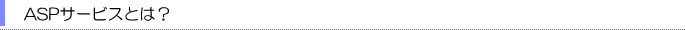
<style>
.page{position:relative;width:685px;height:30px;background:#ffffff}
.page>*{position:absolute;margin:0}
.t1{font:16px "HGMaruGothicMPRO";color:#000000}
</style>
<div class="page">
<p class="t1" style="left:24px;top:6px;width:145px;height:15px">ASPサービスとは？</p>
</div>
